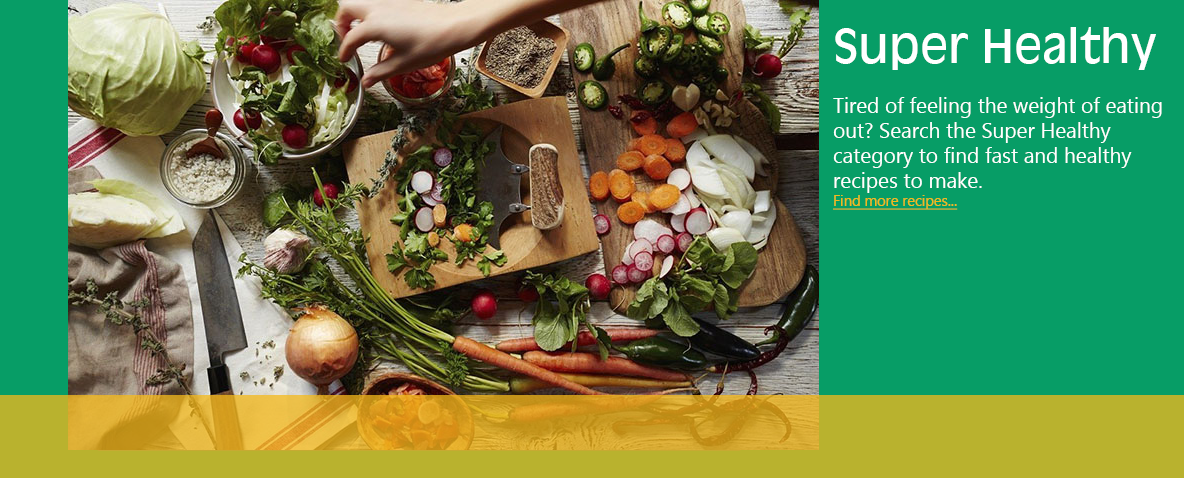
<style>
.page{position:relative;width:1184px;height:478px;background:#079d66}
.page>*{position:absolute;margin:0}
.t1{font:20.8px "MicrosoftTaiLe";color:#ffffff}
.t2{font:45.8px "AntiqueOlive-Roman";color:#ffffff}
.t3{font:14.6px "MicrosoftTaiLe";color:#f4b91b;text-decoration:underline}
</style>
<div class="page">
<p class="t1" style="left:833px;top:27px;width:329px;height:183px"><span class="t2">Super Healthy<br></span><br>Tired of feeling the weight of eating out? Search the Super Healthy category to find fast and healthy recipes to make.<br><span class="t3">Find more recipes...</span></p>
</div>
